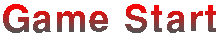
<style>
.page{position:relative;width:221px;height:37px;background:#ffffff}
.page>*{position:absolute;margin:0}
.t1{font:36px "H2gtrE"}
</style>
<div class="page">
<p class="t1" style="left:3px;top:4px;width:213px;height:29px">Game Start</p>
</div>
